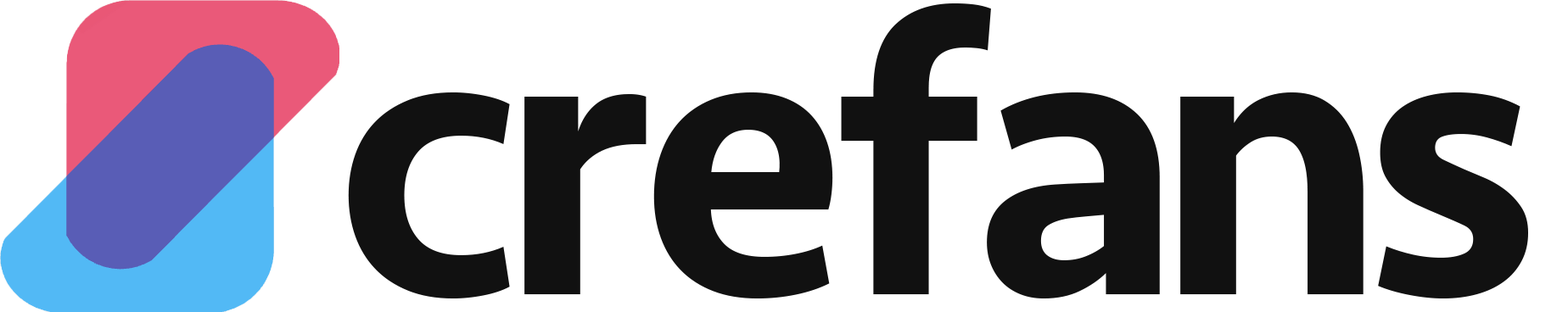
<style>
.page{position:relative;width:1568px;height:312px;background:#ffffff}
.page>*{position:absolute;margin:0}
.t1{font:406.2px "Seravek-Medium";color:#111111}
</style>
<div class="page">
<p class="t1" style="left:348px;top:3px;width:1180px;height:296px">crefans</p>
</div>
